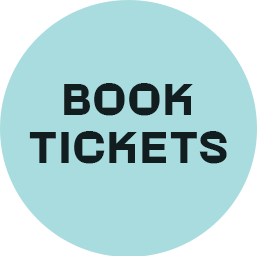
<style>
.page{position:relative;width:257px;height:256px;background:#a9dcdf}
.page>*{position:absolute;margin:0}
.t1{font:40.1px "RotontoTrial-Bold";letter-spacing:0.05em;color:#121d1f;text-transform:uppercase}
</style>
<div class="page">
<p class="t1" style="left:29px;top:83px;width:198px;height:81px;text-align:center">Book<br>Tickets</p>
</div>
